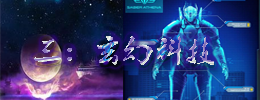
<style>
.page{position:relative;width:260px;height:100px}
.page>*{position:absolute;margin:0}
.t1{font:30px "2.0-";letter-spacing:0.001em}
</style>
<div class="page">
<p class="t1" style="left:34px;top:36px;width:180px;height:29px">三：玄幻科技</p>
</div>
